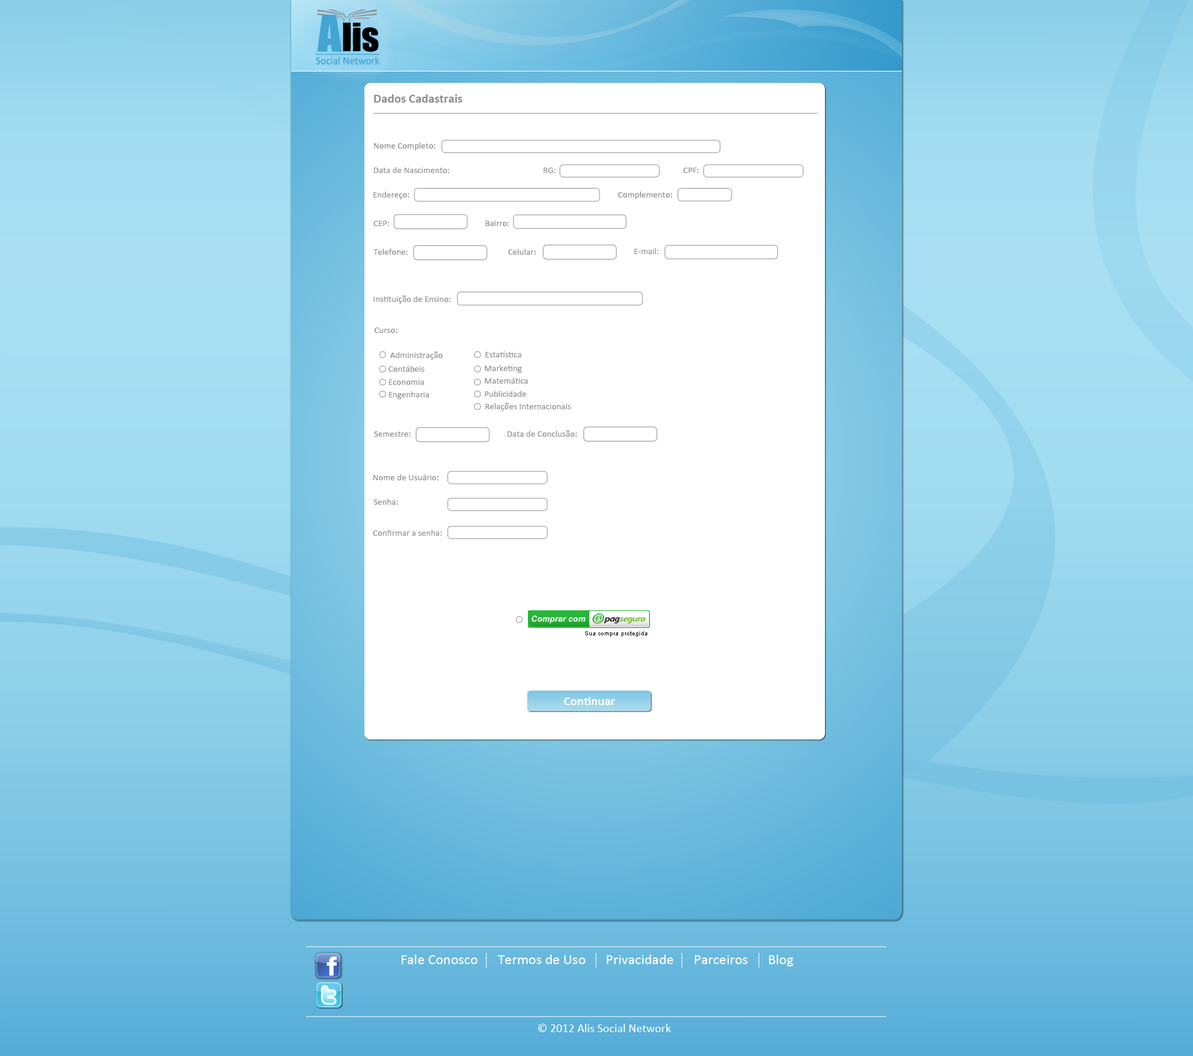
<style>
.page{position:relative;width:1193px;height:1056px;background:#ffffff}
.page>*{position:absolute;margin:0}
.t1{font:12.5px "Calibri-Bold";color:#8d8d8e}
.t2{font:9px "Calibri";color:#8d8d8e}
.t3{font:12.5px "Calibri-Bold";color:#ffffff}
.t4{font:14.3px "Calibri";letter-spacing:0.005em;color:#ffffff}
.t5{font:11.9px "Calibri";letter-spacing:0.005em;color:#ffffff}
</style>
<div class="page">
<p class="t1" style="left:374px;top:94px;width:88px;height:9px">Dados Cadastrais</p>
<p class="t2" style="left:374px;top:143px;width:61px;height:7px">Nome Completo:</p>
<p class="t2" style="left:374px;top:167px;width:76px;height:6px">Data de Nascimento:</p>
<p class="t2" style="left:543px;top:168px;width:12px;height:5px">RG:</p>
<p class="t2" style="left:683px;top:168px;width:15px;height:5px">CPF:</p>
<p class="t2" style="left:373px;top:191px;width:36px;height:8px">Endereço:</p>
<p class="t2" style="left:618px;top:191px;width:54px;height:8px">Complemento:</p>
<p class="t2" style="left:373px;top:221px;width:16px;height:5px">CEP:</p>
<p class="t2" style="left:485px;top:221px;width:24px;height:5px">Bairro:</p>
<p class="t2" style="left:373px;top:249px;width:34px;height:6px">Telefone:</p>
<p class="t2" style="left:508px;top:249px;width:28px;height:6px">Celular:</p>
<p class="t2" style="left:634px;top:248px;width:24px;height:6px">E-mail:</p>
<p class="t2" style="left:373px;top:295px;width:78px;height:9px">Instituição de Ensino:</p>
<p class="t2" style="left:375px;top:327px;width:22px;height:6px">Curso:</p>
<p class="t2" style="left:390px;top:351px;width:52px;height:9px">Administração</p>
<p class="t2" style="left:485px;top:351px;width:36px;height:6px">Estatística</p>
<p class="t2" style="left:388px;top:366px;width:37px;height:6px">Contábeis</p>
<p class="t2" style="left:485px;top:365px;width:37px;height:8px">Marketing</p>
<p class="t2" style="left:485px;top:377px;width:43px;height:6px">Matemática</p>
<p class="t2" style="left:389px;top:379px;width:35px;height:6px">Economia</p>
<p class="t2" style="left:389px;top:391px;width:40px;height:8px">Engenharia</p>
<p class="t2" style="left:485px;top:391px;width:42px;height:6px">Publicidade</p>
<p class="t2" style="left:485px;top:403px;width:86px;height:8px">Relações Internacionais</p>
<p class="t2" style="left:374px;top:431px;width:36px;height:6px">Semestre:</p>
<p class="t2" style="left:507px;top:430px;width:70px;height:7px">Data de Conclusão:</p>
<p class="t2" style="left:373px;top:474px;width:65px;height:6px">Nome de Usuário:</p>
<p class="t2" style="left:373px;top:499px;width:25px;height:6px">Senha:</p>
<p class="t2" style="left:373px;top:530px;width:69px;height:6px">Confirmar a senha:</p>
<p class="t3" style="left:564px;top:697px;width:51px;height:8px">Continuar</p>
<p class="t4" style="left:401px;top:954px;width:392px;height:12px">Fale Conosco      Termos de Uso      Privacidade      Parceiros      Blog</p>
<p class="t5" style="left:538px;top:1023px;width:133px;height:9px">© 2012 Alis Social Network</p>
</div>
